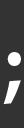
<style>
.page{position:relative;width:24px;height:128px;background:#333333}
.page>*{position:absolute;margin:0}
.t1{font:75px "AdobeGothicStd-Bold";color:#ffffff}
</style>
<div class="page">
<p class="t1" style="left:3px;top:52px;width:18px;height:53px">;</p>
</div>
